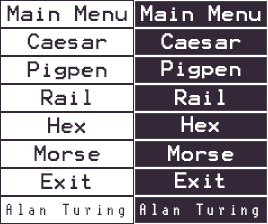
<style>
.page{position:relative;width:268px;height:224px;background:#ffffff}
.page>*{position:absolute;margin:0}
.t1{font:18px "Terminal";color:#342838}
.t2{font:18px "Terminal";color:#ffffff}
.t3{font:15px "Terminal";color:#342838}
.t4{font:15px "Terminal";color:#ffffff}
</style>
<div class="page">
<p class="t1" style="left:7px;top:5px;width:120px;height:16px">Main Menu</p>
<p class="t2" style="left:141px;top:5px;width:120px;height:16px">Main Menu</p>
<p class="t1" style="left:27px;top:33px;width:80px;height:16px">Caesar</p>
<p class="t2" style="left:161px;top:33px;width:80px;height:16px">Caesar</p>
<p class="t1" style="left:27px;top:61px;width:80px;height:19px">Pigpen</p>
<p class="t2" style="left:161px;top:60px;width:80px;height:19px">Pigpen</p>
<p class="t1" style="left:41px;top:89px;width:50px;height:16px">Rail</p>
<p class="t2" style="left:175px;top:89px;width:50px;height:16px">Rail</p>
<p class="t1" style="left:48px;top:117px;width:37px;height:16px">Hex</p>
<p class="t2" style="left:181px;top:116px;width:38px;height:16px">Hex</p>
<p class="t1" style="left:34px;top:145px;width:66px;height:16px">Morse</p>
<p class="t2" style="left:168px;top:145px;width:66px;height:16px">Morse</p>
<p class="t1" style="left:41px;top:173px;width:50px;height:16px">Exit</p>
<p class="t2" style="left:175px;top:172px;width:50px;height:16px">Exit</p>
<p class="t3" style="left:6px;top:203px;width:119px;height:15px">Alan Turing</p>
<p class="t4" style="left:140px;top:203px;width:118px;height:15px">Alan Turing</p>
</div>
